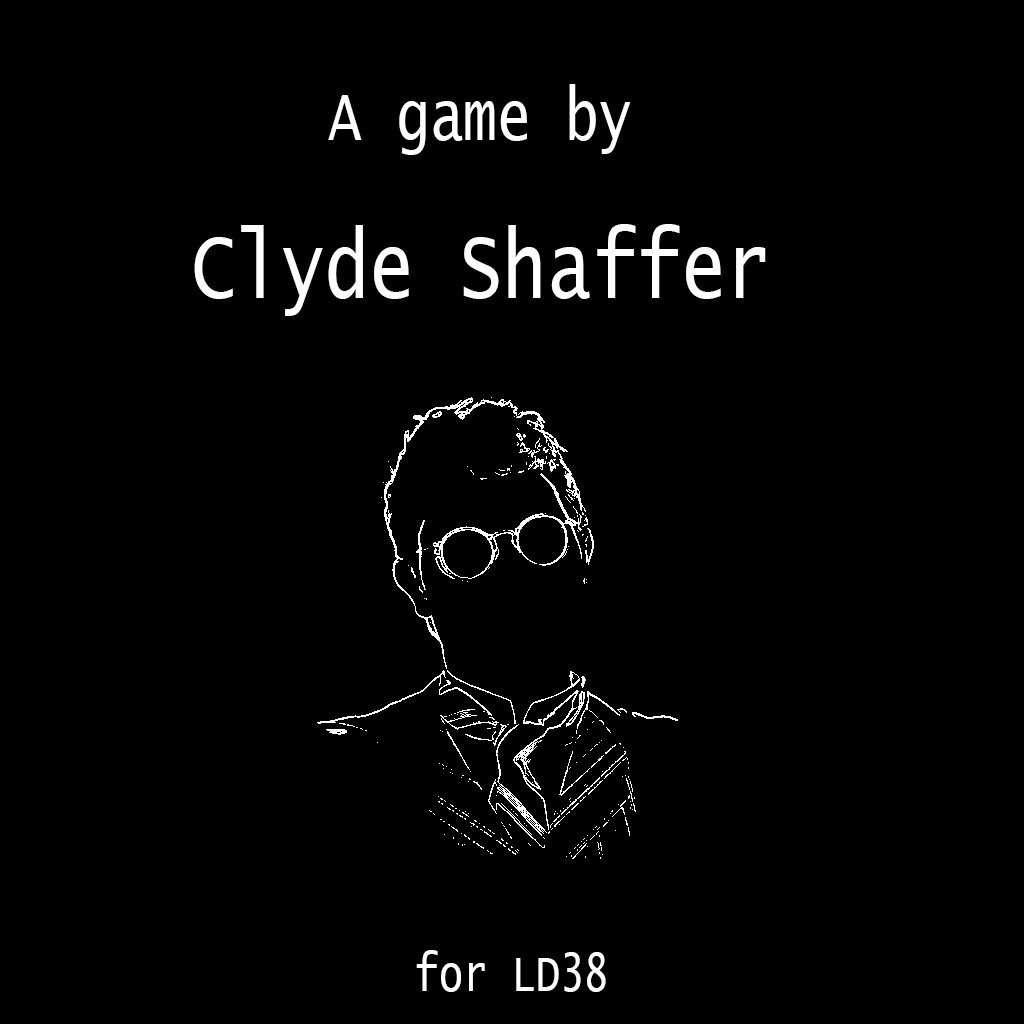
<style>
.page{position:relative;width:1024px;height:1024px;background:#000000}
.page>*{position:absolute;margin:0}
.t1{font:95px "LucidaConsole";color:#ffffff;scale:0.78 1}
.t2{font:72px "LucidaConsole";color:#ffffff;scale:0.78 1}
.t3{font:51.8px "LucidaConsole";color:#ffffff;scale:0.78 1}
</style>
<div class="page">
<p class="t1" style="left:194px;top:84px;width:572px;height:232px;text-align:center"><span class="t2">A game by<br></span>Clyde Shaffer</p>
<p class="t3" style="left:416px;top:950px;width:190px;height:42px">for LD38</p>
</div>
